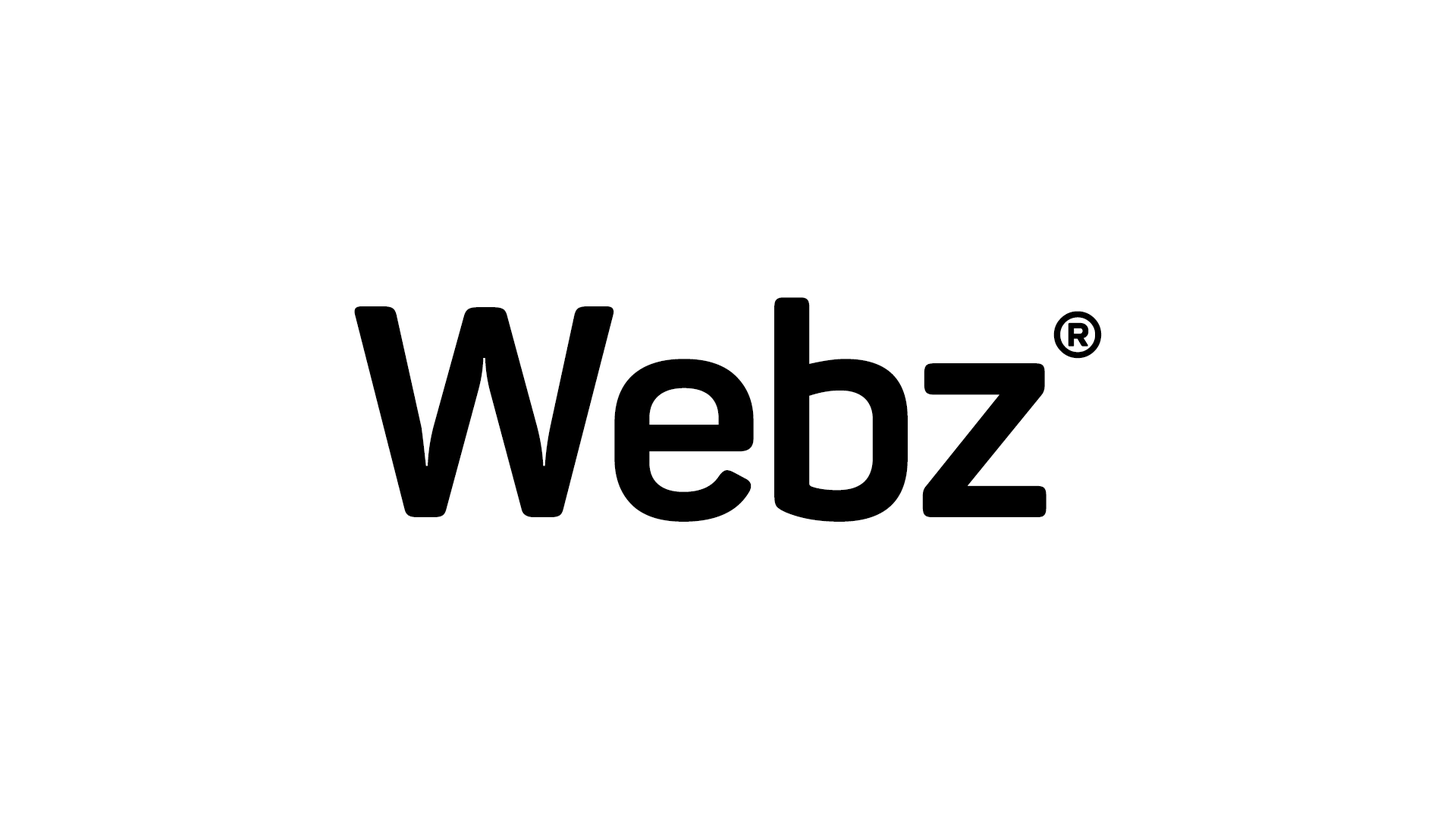
<style>
.page{position:relative;width:1456px;height:819px;background:#ffffff}
.page>*{position:absolute;margin:0}
.t1{font:296.9px "Panton-Bold";letter-spacing:-0.02em;color:#000000}
.t2{font:120.4px "Panton-Bold";letter-spacing:-0.02em;color:#000000}
</style>
<div class="page">
<p class="t1" style="left:354px;top:297px;width:748px;height:225px">Webz<span class="t2">®</span></p>
</div>
